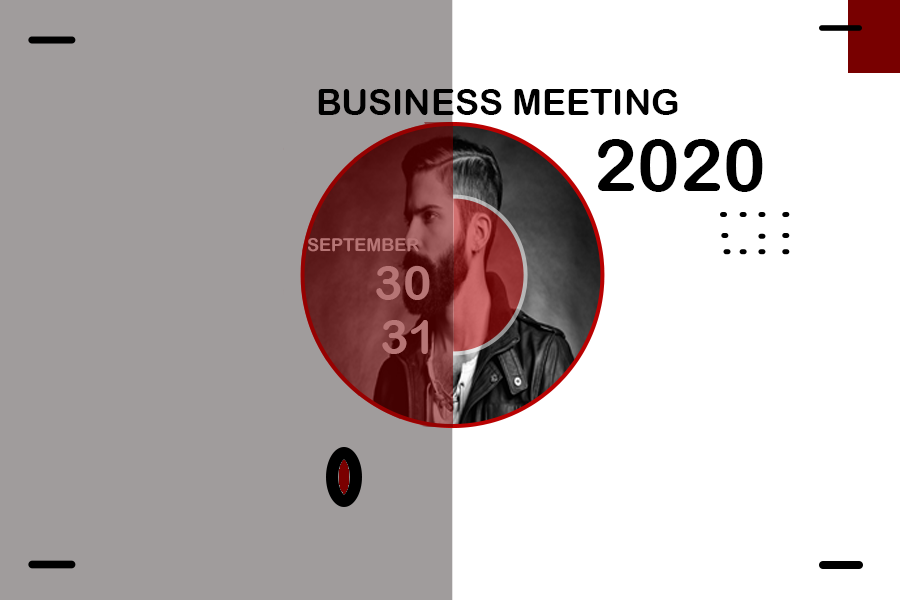
<style>
.page{position:relative;width:900px;height:600px;background:#a09c9c}
.page>*{position:absolute;margin:0}
.t1{font:36px "ArialRoundedMTBold";color:#000000}
.t2{font:72px "ArialRoundedMTBold";color:#000000}
.t3{font:18px "ArialRoundedMTBold";color:#b67575}
.t4{font:48px "ArialRoundedMTBold";color:#b67575}
</style>
<div class="page">
<p class="t1" style="left:318px;top:89px;width:360px;height:26px">BUSINESS MEETING</p>
<p class="t2" style="left:598px;top:139px;width:165px;height:53px">2020</p>
<p class="t3" style="left:308px;top:238px;width:111px;height:14px">SEPTEMBER</p>
<p class="t4" style="left:376px;top:266px;width:54px;height:34px">30</p>
<p class="t4" style="left:382px;top:320px;width:46px;height:34px">31</p>
</div>
